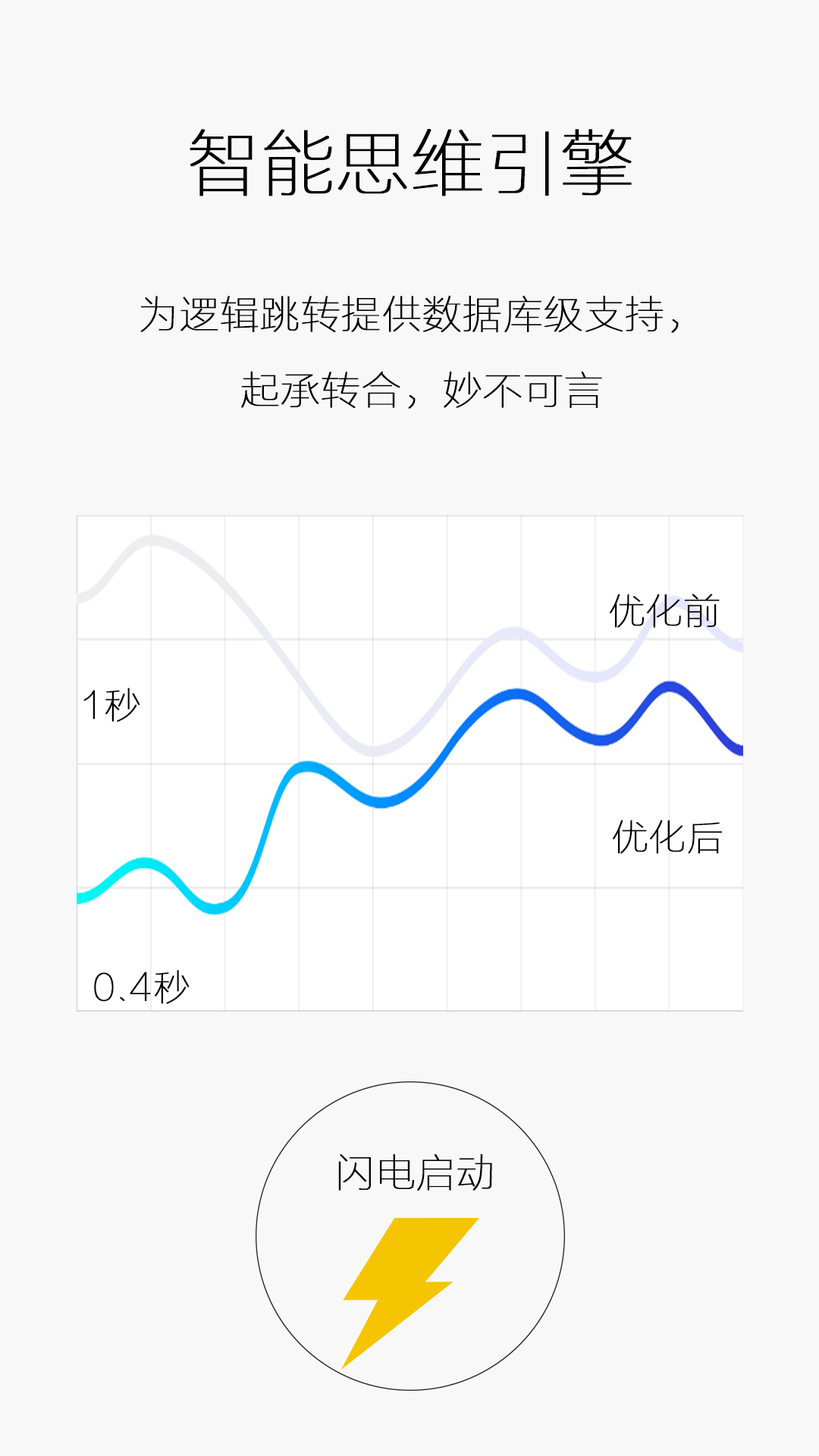
<style>
.page{position:relative;width:819px;height:1456px;background:#f8f8f8}
.page>*{position:absolute;margin:0}
.t1{font:72.8px "FZLTCXHJW--GB1-0";color:#000000;font-weight:bold}
.t2{font:39.4px/75.5px "FZLTCXHJW--GB1-0";color:#000000;font-weight:bold}
.t3{font:36.4px "FZLTCXHJW--GB1-0";color:#000000;font-weight:bold}
.t4{font:39.4px "FZLTCXHJW--GB1-0";color:#010101;font-weight:bold}
</style>
<div class="page">
<p class="t1" style="left:190px;top:129px;width:442px;height:67px">智能思维引擎</p>
<p class="t2" style="left:140px;top:296px;width:539px;height:113px;text-align:center">为逻辑跳转提供数据库级支持，<br>起承转合，妙不可言</p>
<p class="t3" style="left:609px;top:594px;width:111px;height:34px">优化前</p>
<p class="t3" style="left:83px;top:688px;width:57px;height:34px">1秒</p>
<p class="t3" style="left:612px;top:820px;width:111px;height:34px">优化后</p>
<p class="t3" style="left:94px;top:970px;width:96px;height:34px">0.4秒</p>
<p class="t4" style="left:338px;top:1154px;width:154px;height:37px">闪电启动</p>
</div>
